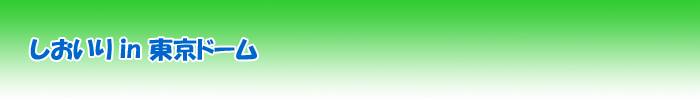
<style>
.page{position:relative;width:700px;height:100px}
.page>*{position:absolute;margin:0}
.t1{font:24px "HGPSoeiKakupoptai";color:#0066cc}
</style>
<div class="page">
<p class="t1" style="left:30px;top:38px;width:227px;height:23px">しおいり in 東京ドーム</p>
</div>
